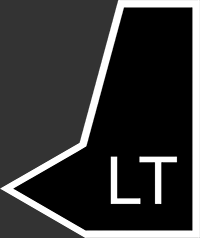
<style>
.page{position:relative;width:200px;height:238px;background:#000000}
.page>*{position:absolute;margin:0}
.t1{font:66.1px "ArialMT";color:#ffffff}
</style>
<div class="page">
<p class="t1" style="left:110px;top:156px;width:67px;height:48px">LT</p>
</div>
